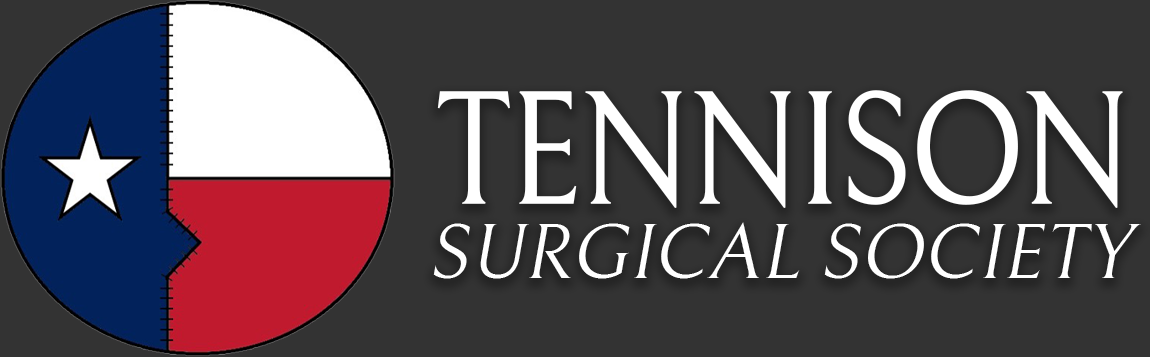
<style>
.page{position:relative;width:1150px;height:357px;background:#333333}
.page>*{position:absolute;margin:0}
.t1{font:161.5px "Bellefair-Regular";letter-spacing:-0.05em;color:#ffffff;font-weight:bold;scale:0.87 1}
.t2{font:77.2px "Bellefair-Regular";color:#ffffff;font-style:italic}
</style>
<div class="page">
<p class="t1" style="left:437px;top:90px;width:686px;height:118px">TENNISON</p>
<p class="t2" style="left:433px;top:222px;width:708px;height:57px">SURGICAL SOCIETY</p>
</div>
